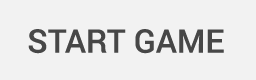
<style>
.page{position:relative;width:256px;height:80px;background:#f2f2f2}
.page>*{position:absolute;margin:0}
.t1{font:32.6px "Roboto-Medium";color:#474747}
</style>
<div class="page">
<p class="t1" style="left:28px;top:29px;width:196px;height:25px">START GAME</p>
</div>
